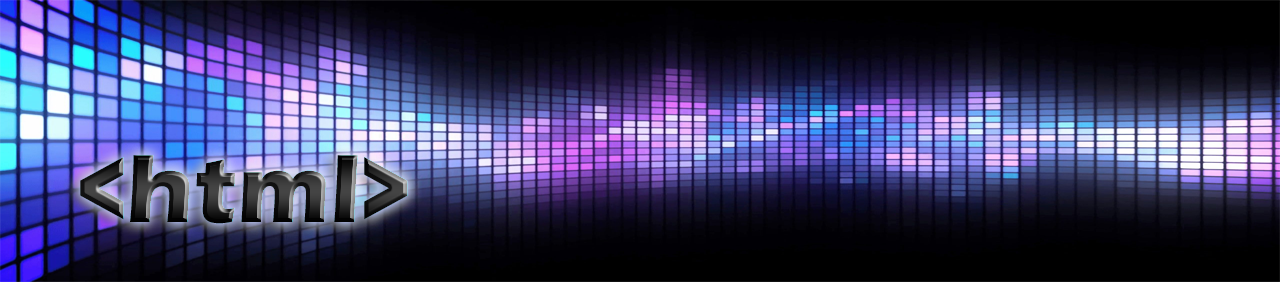
<style>
.page{position:relative;width:1280px;height:282px}
.page>*{position:absolute;margin:0}
.t1{font:100px "ErasITC-Bold"}
</style>
<div class="page">
<p class="t1" style="left:80px;top:155px;width:328px;height:69px">&lt;html&gt;</p>
</div>
